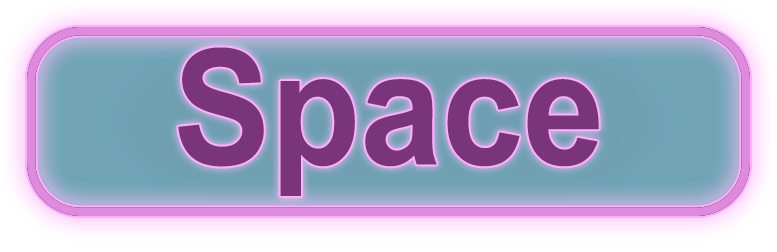
<style>
.page{position:relative;width:777px;height:252px}
.page>*{position:absolute;margin:0}
.t1{font:160.4px "Arial-BoldMT";color:#7a3479;scale:0.91 1}
</style>
<div class="page">
<p class="t1" style="left:178px;top:47px;width:421px;height:149px">Space</p>
</div>
